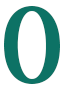
<style>
.page{position:relative;width:64px;height:88px;background:#ffffff}
.page>*{position:absolute;margin:0}
.t1{font:100px "ChiaroStd-B";color:#0d7265;scale:1.03 1}
</style>
<div class="page">
<p class="t1" style="left:4px;top:5px;width:56px;height:80px">0</p>
</div>
